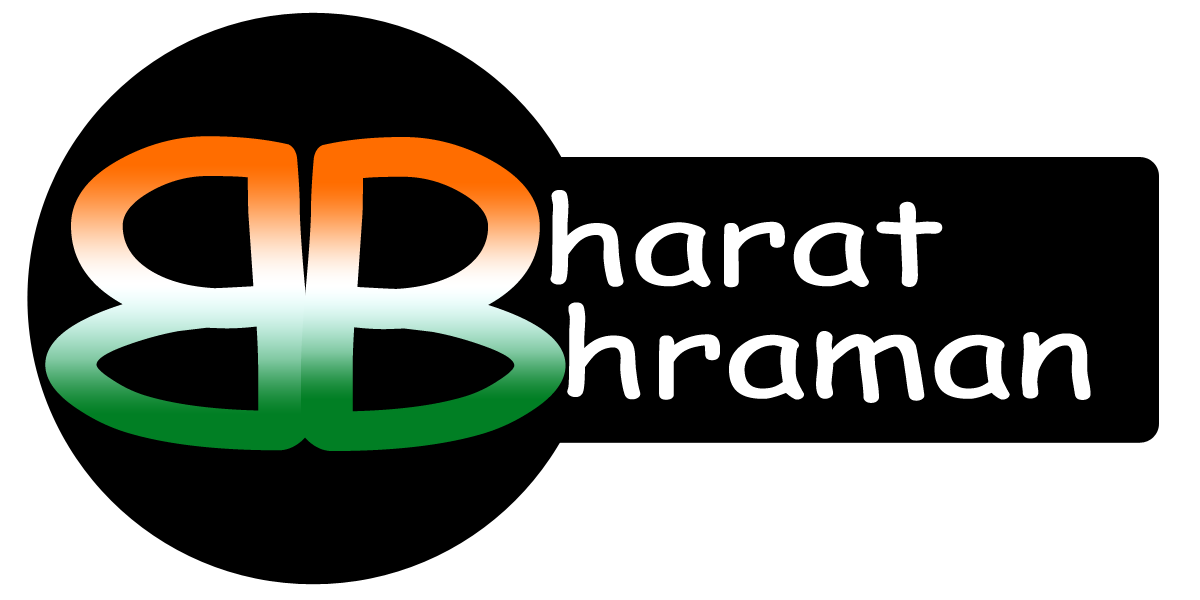
<style>
.page{position:relative;width:1200px;height:600px;background:#ffffff}
.page>*{position:absolute;margin:0}
.t1{font:396.8px "ComicSansMS";scale:1.34 1}
.t2{font:119px "ComicSansMS";color:#ffffff;scale:1.34 1}
</style>
<div class="page">
<p class="t1" style="left:45px;top:136px;width:265px;height:315px;rotate:180deg">B</p>
<p class="t1" style="left:301px;top:137px;width:265px;height:314px">B</p>
<p class="t2" style="left:550px;top:190px;width:393px;height:98px">harat</p>
<p class="t2" style="left:567px;top:302px;width:524px;height:101px">hraman</p>
</div>
